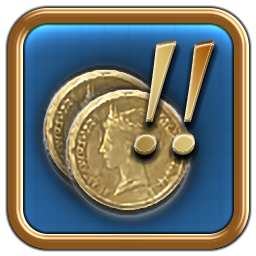
<style>
.page{position:relative;width:256px;height:256px}
.page>*{position:absolute;margin:0}
.t1{font:189px "MonotypeCorsiva";letter-spacing:-0.11em;scale:1.19 1}
</style>
<div class="page">
<p class="t1" style="left:134px;top:40px;width:81px;height:115px">!!</p>
</div>
